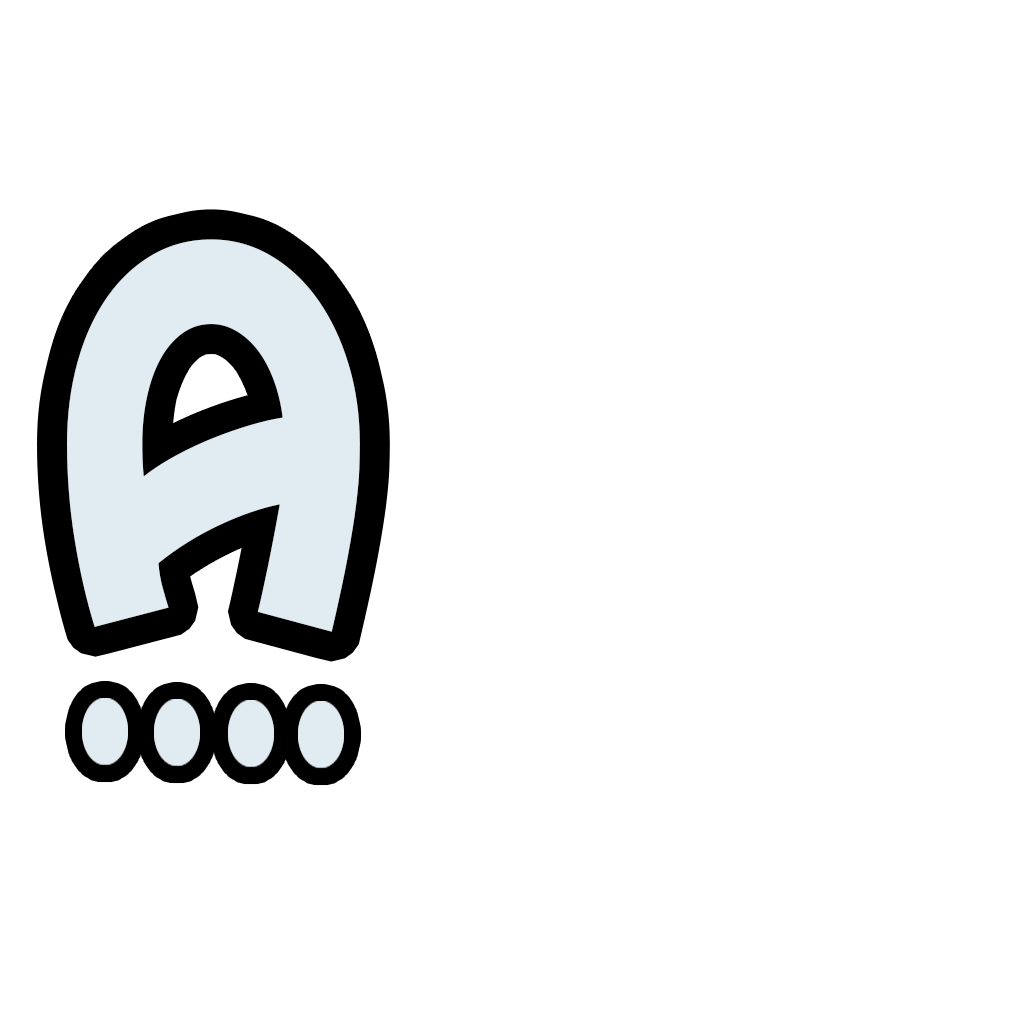
<style>
.page{position:relative;width:1024px;height:1024px;background:#ffffff}
.page>*{position:absolute;margin:0}
.t1{font:535.5px "MailRayStuff-Regular";color:#e1ebf2;scale:0.89 1}
</style>
<div class="page">
<p class="t1" style="left:67px;top:239px;width:293px;height:393px">A</p>
</div>
